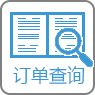
<style>
.page{position:relative;width:95px;height:95px;background:#ffffff}
.page>*{position:absolute;margin:0}
.t1{font:18px "MicrosoftYaHei";color:#3998d6}
</style>
<div class="page">
<p class="t1" style="left:13px;top:66px;width:72px;height:18px">订单查询</p>
</div>
